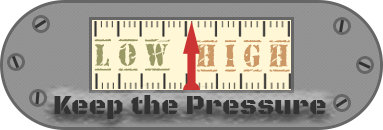
<style>
.page{position:relative;width:383px;height:130px}
.page>*{position:absolute;margin:0}
.t1{font:32.1px "OldStamper";letter-spacing:0.31em;color:#999966;scale:0.84 1}
.t2{font:32.1px "OldStamper";letter-spacing:0.31em;color:#cc9966;scale:0.84 1}
.t3{font:27.1px "BlackOpsOne-Regular";color:#333333}
</style>
<div class="page">
<p class="t1" style="left:94px;top:39px;width:76px;height:32px">Low</p>
<p class="t2" style="left:196px;top:40px;width:94px;height:32px">HIGH</p>
<p class="t3" style="left:54px;top:95px;width:272px;height:24px">Keep the Pressure</p>
</div>
